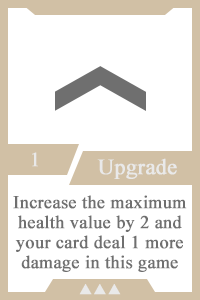
<style>
.page{position:relative;width:200px;height:300px;background:#ffffff}
.page>*{position:absolute;margin:0}
.t1{font:20px "TimesNewRomanPSMT";color:#e9e9e9;font-weight:bold}
.t2{font:22px "TimesNewRomanPSMT";color:#e9e9e9;font-weight:bold}
.t3{font:18px/20px "TimesNewRomanPSMT";color:#6f6f6f;font-weight:bold}
.t4{font:14px "AdobeHeitiStd-Regular";color:#e9e9e9;font-weight:bold}
</style>
<div class="page">
<p class="t1" style="left:32px;top:152px;width:6px;height:15px">1</p>
<p class="t2" style="left:97px;top:158px;width:80px;height:21px">Upgrade</p>
<p class="t3" style="left:13px;top:195px;width:174px;height:77px;text-align:center">Increase the maximum health value by 2 and your card deal 1 more damage in this game</p>
<p class="t4" style="left:79px;top:284px;width:42px;height:11px">▲▲▲</p>
</div>
